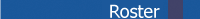
<style>
.page{position:relative;width:200px;height:19px;background:#1b589b}
.page>*{position:absolute;margin:0}
.t1{font:18px "Tahoma";color:#ffffff}
</style>
<div class="page">
<p class="t1" style="left:110px;top:4px;width:50px;height:14px">Roster</p>
</div>
